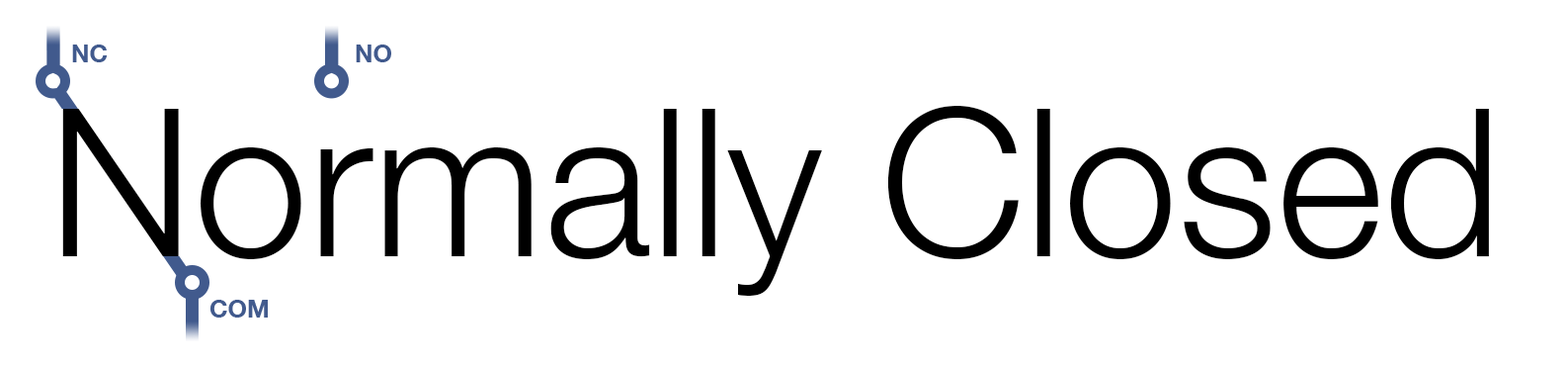
<style>
.page{position:relative;width:1568px;height:368px;background:#ffffff}
.page>*{position:absolute;margin:0}
.t1{font:24.7px "HelveticaNeue-Bold";color:#415a8d}
.t2{font:205.8px "HelveticaNeue-Light";color:#010101}
</style>
<div class="page">
<p class="t1" style="left:72px;top:44px;width:36px;height:18px">NC</p>
<p class="t1" style="left:356px;top:44px;width:35px;height:18px">NO</p>
<p class="t2" style="left:62px;top:106px;width:1427px;height:189px">Normally Closed</p>
<p class="t1" style="left:209px;top:299px;width:59px;height:18px">COM</p>
</div>
